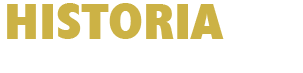
<style>
.page{position:relative;width:303px;height:73px;background:#ffffff}
.page>*{position:absolute;margin:0}
.t1{font:51.3px "Humanist521BT-XtraBoldCondensed";color:#ccb245;scale:1.05 1}
</style>
<div class="page">
<p class="t1" style="left:7px;top:3px;width:217px;height:36px">HISTORIA</p>
</div>
